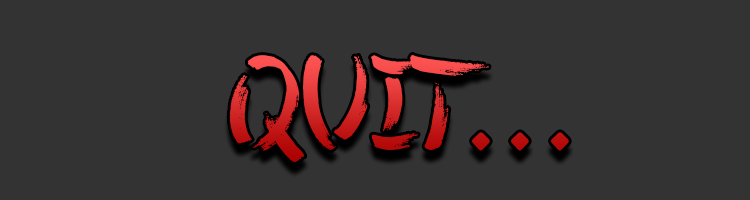
<style>
.page{position:relative;width:750px;height:200px;background:#333333}
.page>*{position:absolute;margin:0}
.t1{font:134.7px "ChineseTakeaway";scale:1.07 1}
</style>
<div class="page">
<p class="t1" style="left:229px;top:54px;width:340px;height:108px">Quit...</p>
</div>
